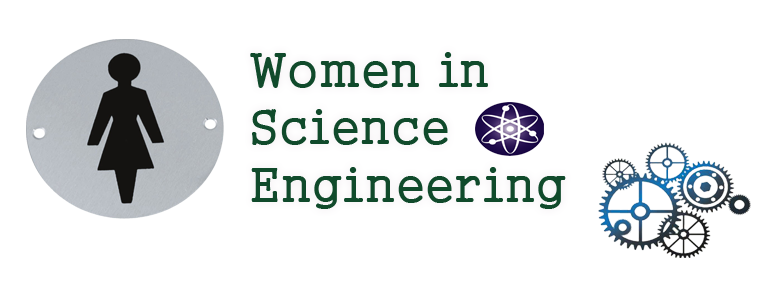
<style>
.page{position:relative;width:768px;height:288px;background:#ffffff}
.page>*{position:absolute;margin:0}
.t1{font:48px "Gungsuh";color:#104a2b}
</style>
<div class="page">
<p class="t1" style="left:250px;top:52px;width:316px;height:157px">Women in<br>Science  &amp;  <br>Engineering</p>
</div>
